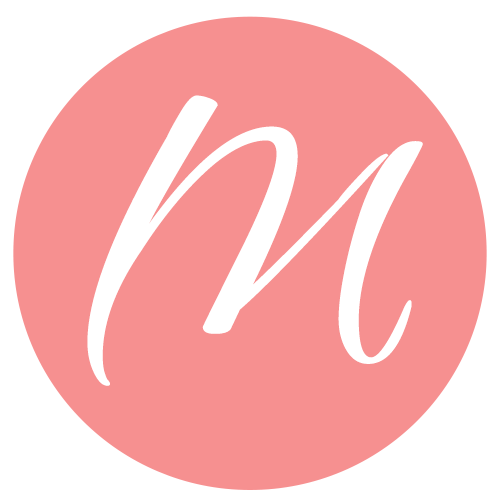
<style>
.page{position:relative;width:500px;height:500px;background:#f69090}
.page>*{position:absolute;margin:0}
.t1{font:484.9px "Qwigley-Regular";color:#ffffff}
</style>
<div class="page">
<p class="t1" style="left:87px;top:95px;width:336px;height:291px">M</p>
</div>
